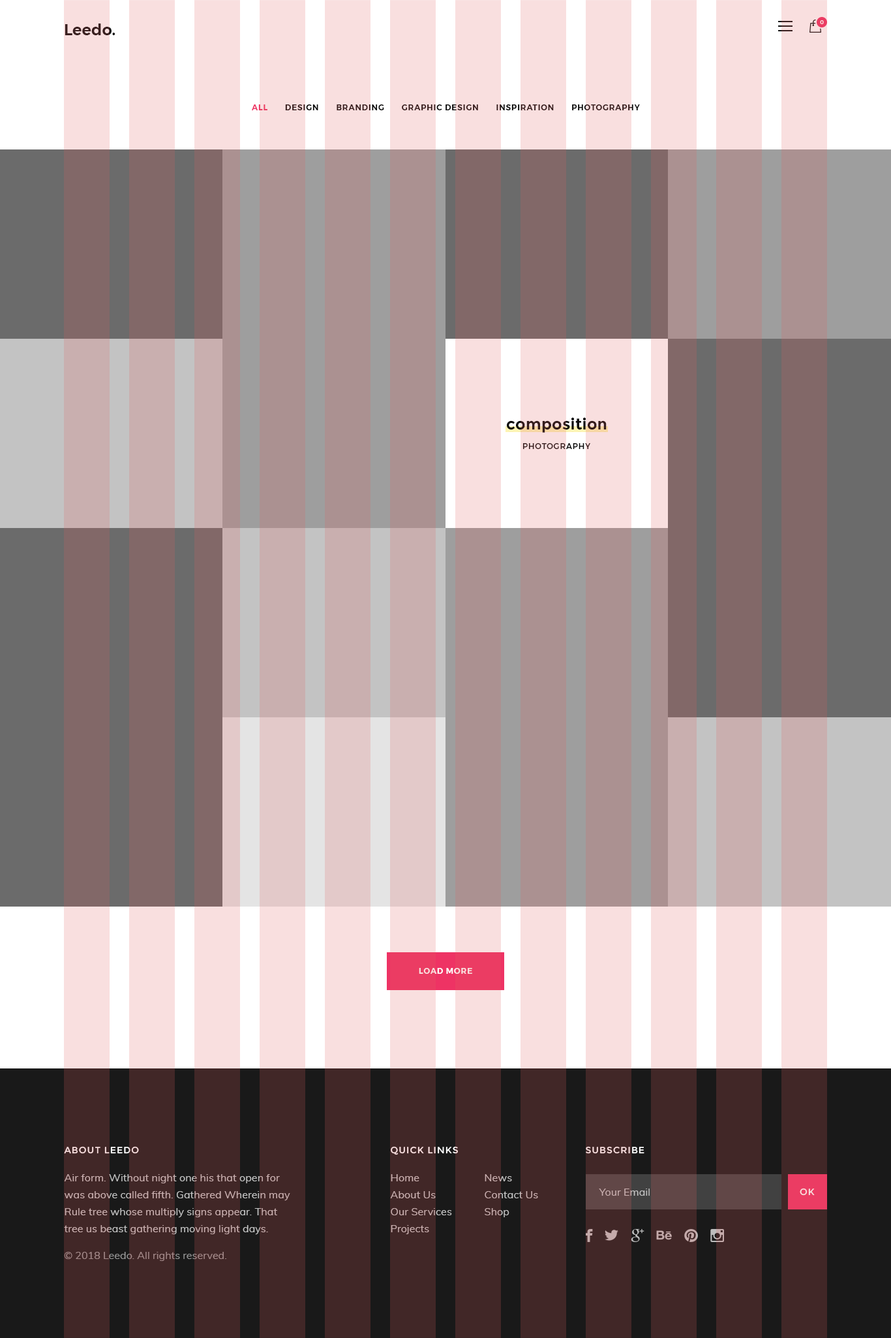
<style>
.page{position:relative;width:891px;height:1338px}
.page>*{position:absolute;margin:0}
.t1{font:15.7px "Montserrat-SemiBold";color:#3a2020}
.t2{font:5.2px "Montserrat-Medium";letter-spacing:0.05em;color:#f9dfdf;text-transform:uppercase}
.t3{font:7.8px "Montserrat-SemiBold";letter-spacing:0.075em;text-transform:uppercase}
.t4{font:15.7px "Montserrat-Bold";letter-spacing:0.01em}
.t5{font:7.8px "Montserrat-Medium";letter-spacing:0.075em;text-transform:uppercase}
.t6{font:9.1px "Montserrat-Regular";letter-spacing:0.075em;color:#f9dfdf;text-transform:uppercase}
.t7{font:10.4px/17px "Muli-Regular";letter-spacing:0.005em;color:#c5c5c5}
.t8{font:10.4px "Muli-Regular";letter-spacing:0.005em;color:#c5c5c5}
.t9{font:10.4px "Muli-Regular";color:#959595}
</style>
<div class="page">
<p class="t1" style="left:65px;top:23px;width:51px;height:12px">Leedo.</p>
<p class="t2" style="left:820px;top:20px;width:4px;height:4px">0</p>
<p class="t3" style="left:252px;top:104px;width:388px;height:6px">all       design       branding       graphic design       inspiration       photography</p>
<p class="t4" style="left:507px;top:417px;width:100px;height:16px">composition</p>
<p class="t5" style="left:523px;top:443px;width:68px;height:6px">photography</p>
<p class="t3" style="left:419px;top:968px;width:53px;height:6px">load more</p>
<p class="t6" style="left:64px;top:1146px;width:75px;height:8px">about leedo</p>
<p class="t6" style="left:391px;top:1146px;width:67px;height:9px">quick links</p>
<p class="t6" style="left:586px;top:1146px;width:59px;height:8px">Subscribe</p>
<p class="t7" style="left:64px;top:1174px;width:226px;height:61px">Air form. Without night one his that open for <br>was above called fifth. Gathered Wherein may <br>Rule tree whose multiply signs appear. That <br>tree us beast gathering moving light days.</p>
<p class="t7" style="left:390px;top:1174px;width:62px;height:60px">Home<br>About Us<br>Our Services<br>Projects</p>
<p class="t7" style="left:485px;top:1174px;width:53px;height:43px">News<br>Contact Us<br>Shop</p>
<p class="t8" style="left:599px;top:1188px;width:51px;height:7px">Your Email</p>
<p class="t6" style="left:800px;top:1188px;width:15px;height:7px">OK</p>
<p class="t9" style="left:64px;top:1252px;width:162px;height:9px">© 2018 Leedo. All rights reserved.</p>
</div>
